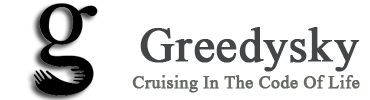
<style>
.page{position:relative;width:370px;height:100px;background:#ffffff}
.page>*{position:absolute;margin:0}
.t1{font:48px "TimesNewRomanPSMT";color:#434546;font-weight:bold}
.t2{font:22px "Aparajita";color:#666964;font-weight:bold}
</style>
<div class="page">
<p class="t1" style="left:140px;top:27px;width:220px;height:45px">Greedysky</p>
<p class="t2" style="left:132px;top:75px;width:228px;height:18px">Cruising In The Code Of Life</p>
</div>
